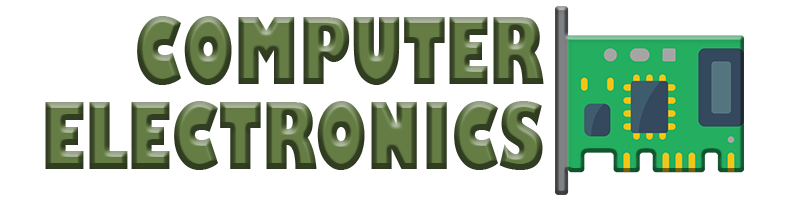
<style>
.page{position:relative;width:800px;height:200px;background:#ffffff}
.page>*{position:absolute;margin:0}
.t1{font:90px "GillSans-UltraBoldCondensed"}
</style>
<div class="page">
<p class="t1" style="left:137px;top:16px;width:407px;height:69px">COMPUTER</p>
<p class="t1" style="left:45px;top:101px;width:498px;height:69px">ELECTRONICS</p>
</div>
